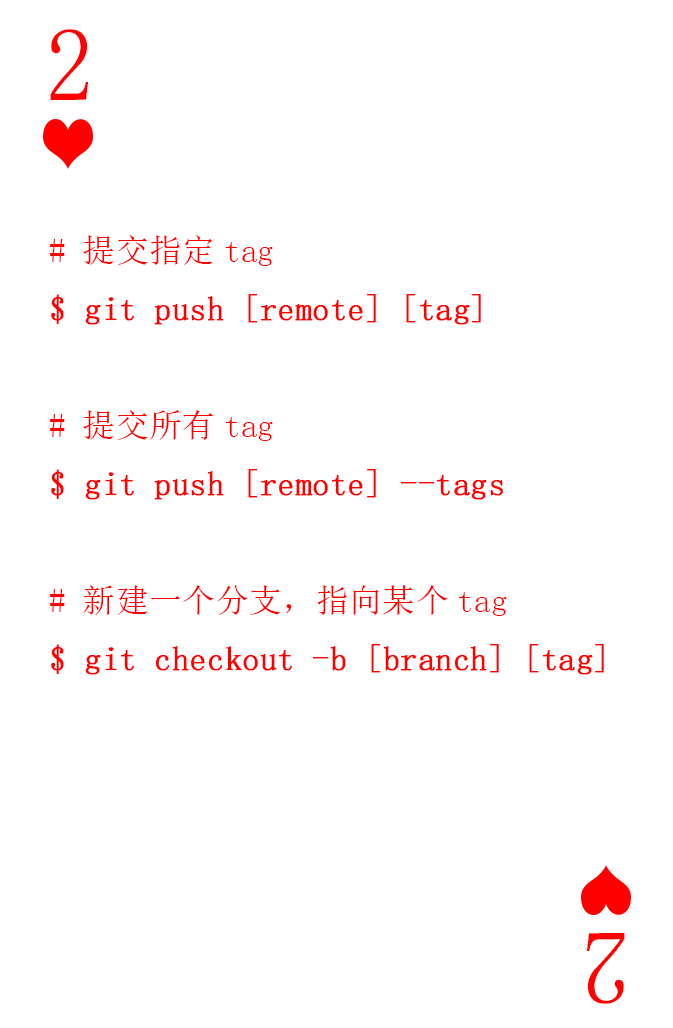
<style>
.page{position:relative;width:673px;height:1028px;background:#ffffff}
.page>*{position:absolute;margin:0}
.t1{font:104.2px "SimSun-ExtB";color:#ff0101;scale:0.93 1}
.t2{font:33.3px "SimSun";color:#ff0000;font-weight:bold}
.t3{font:33.3px "SimSun";color:#ff0000}
</style>
<div class="page">
<p class="t1" style="left:50px;top:29px;width:39px;height:71px">2</p>
<p class="t2" style="left:50px;top:235px;width:554px;height:440px"><span class="t3"># 提交指定tag<br></span>$ git push [remote] [tag]<br><span class="t3"><br># 提交所有tag<br></span>$ git push [remote] --tags<br><span class="t3"><br># 新建一个分支，指向某个tag<br></span>$ git checkout -b [branch] [tag]</p>
<p class="t1" style="left:586px;top:933px;width:39px;height:71px;rotate:180deg">2</p>
</div>
